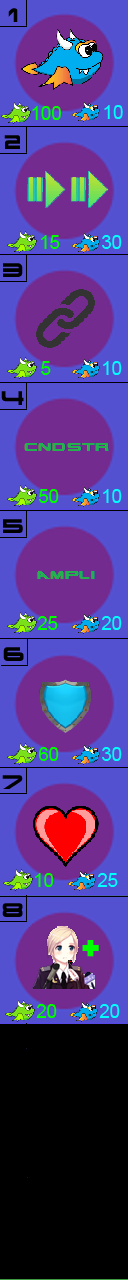
<style>
.page{position:relative;width:128px;height:1280px;background:#5451d1}
.page>*{position:absolute;margin:0}
.t1{font:18.7px "TerminatorRealNFI";color:#000000}
.t2{font:18.7px "ArialMT";color:#00ff00}
.t3{font:18.7px "ArialMT";color:#00fefe}
</style>
<div class="page">
<p class="t1" style="left:8px;top:8px;width:10px;height:14px">1</p>
<p class="t2" style="left:32px;top:106px;width:29px;height:14px">100</p>
<p class="t3" style="left:104px;top:105px;width:19px;height:14px">10</p>
<p class="t1" style="left:4px;top:135px;width:16px;height:14px">2</p>
<p class="t2" style="left:41px;top:235px;width:19px;height:14px">15</p>
<p class="t3" style="left:102px;top:235px;width:20px;height:14px">30</p>
<p class="t1" style="left:3px;top:263px;width:20px;height:14px">3</p>
<p class="t2" style="left:41px;top:361px;width:10px;height:14px">5</p>
<p class="t3" style="left:103px;top:361px;width:19px;height:14px">10</p>
<p class="t1" style="left:1px;top:391px;width:23px;height:14px">4</p>
<p class="t2" style="left:39px;top:489px;width:20px;height:14px">50</p>
<p class="t3" style="left:103px;top:489px;width:19px;height:14px">10</p>
<p class="t1" style="left:3px;top:519px;width:20px;height:14px">5</p>
<p class="t2" style="left:37px;top:616px;width:21px;height:14px">25</p>
<p class="t3" style="left:101px;top:616px;width:21px;height:14px">20</p>
<p class="t1" style="left:3px;top:647px;width:21px;height:14px">6</p>
<p class="t2" style="left:39px;top:747px;width:20px;height:14px">60</p>
<p class="t3" style="left:102px;top:747px;width:20px;height:14px">30</p>
<p class="t1" style="left:2px;top:775px;width:21px;height:14px">7</p>
<p class="t2" style="left:35px;top:873px;width:19px;height:14px">10</p>
<p class="t3" style="left:97px;top:873px;width:21px;height:14px">25</p>
<p class="t1" style="left:2px;top:903px;width:21px;height:14px">8</p>
<p class="t2" style="left:36px;top:1004px;width:21px;height:14px">20</p>
<p class="t3" style="left:99px;top:1004px;width:21px;height:14px">20</p>
</div>
